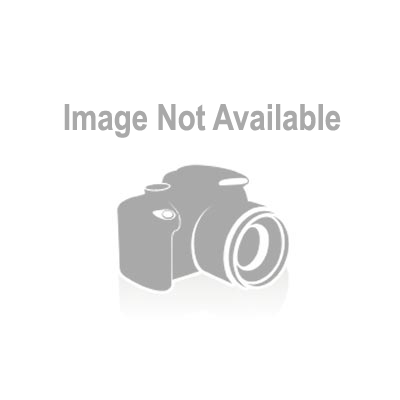
<style>
.page{position:relative;width:400px;height:400px;background:#ffffff}
.page>*{position:absolute;margin:0}
.t1{font:36px "ArialNarrow-Bold";color:#a9a9a9}
</style>
<div class="page">
<p class="t1" style="left:64px;top:104px;width:277px;height:34px">Image Not Available</p>
</div>
